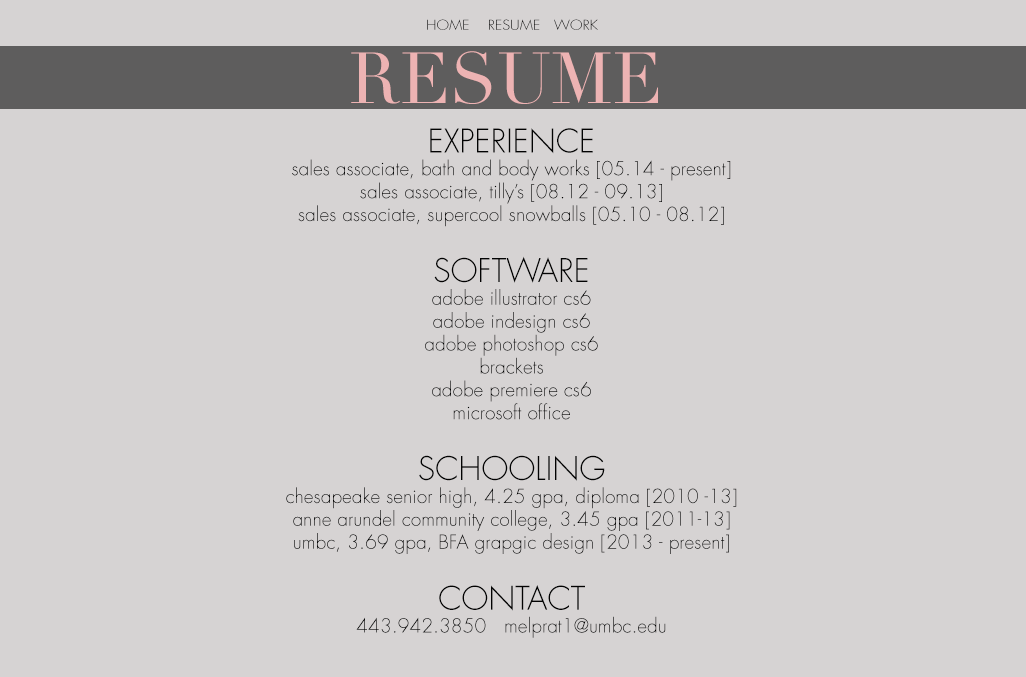
<style>
.page{position:relative;width:1026px;height:677px;background:#d6d3d3}
.page>*{position:absolute;margin:0}
.t1{font:13.3px "Futura-Light";scale:1.1 1}
.t2{font:70.8px "Didot";color:#edb3b3}
.t3{font:19px "Futura-Light";color:#020202}
.t4{font:31.7px "Futura-Light";color:#020202}
</style>
<div class="page">
<p class="t1" style="left:427px;top:19px;width:171px;height:11px">HOME    RESUME   WORK</p>
<p class="t2" style="left:351px;top:51px;width:307px;height:53px">RESUME</p>
<p class="t3" style="left:286px;top:128px;width:451px;height:510px;text-align:center"><span class="t4">EXPERIENCE<br></span>sales associate, bath and body works [05.14 - present]<br>sales associate, tilly’s [08.12 - 09.13]<br>sales associate, supercool snowballs [05.10 - 08.12]<br><br><span class="t4">SOFTWARE<br></span>adobe illustrator cs6<br>adobe indesign cs6<br>adobe photoshop cs6<br>brackets<br>adobe premiere cs6<br>microsoft office<br><br><span class="t4">SCHOOLING<br></span>chesapeake senior high, 4.25 gpa, diploma [2010 -13]<br>anne arundel community college, 3.45 gpa [2011-13]<br>umbc, 3.69 gpa, BFA grapgic design [2013 - present]<br><br><span class="t4">CONTACT<br></span>443.942.3850   melprat1@umbc.edu</p>
</div>
